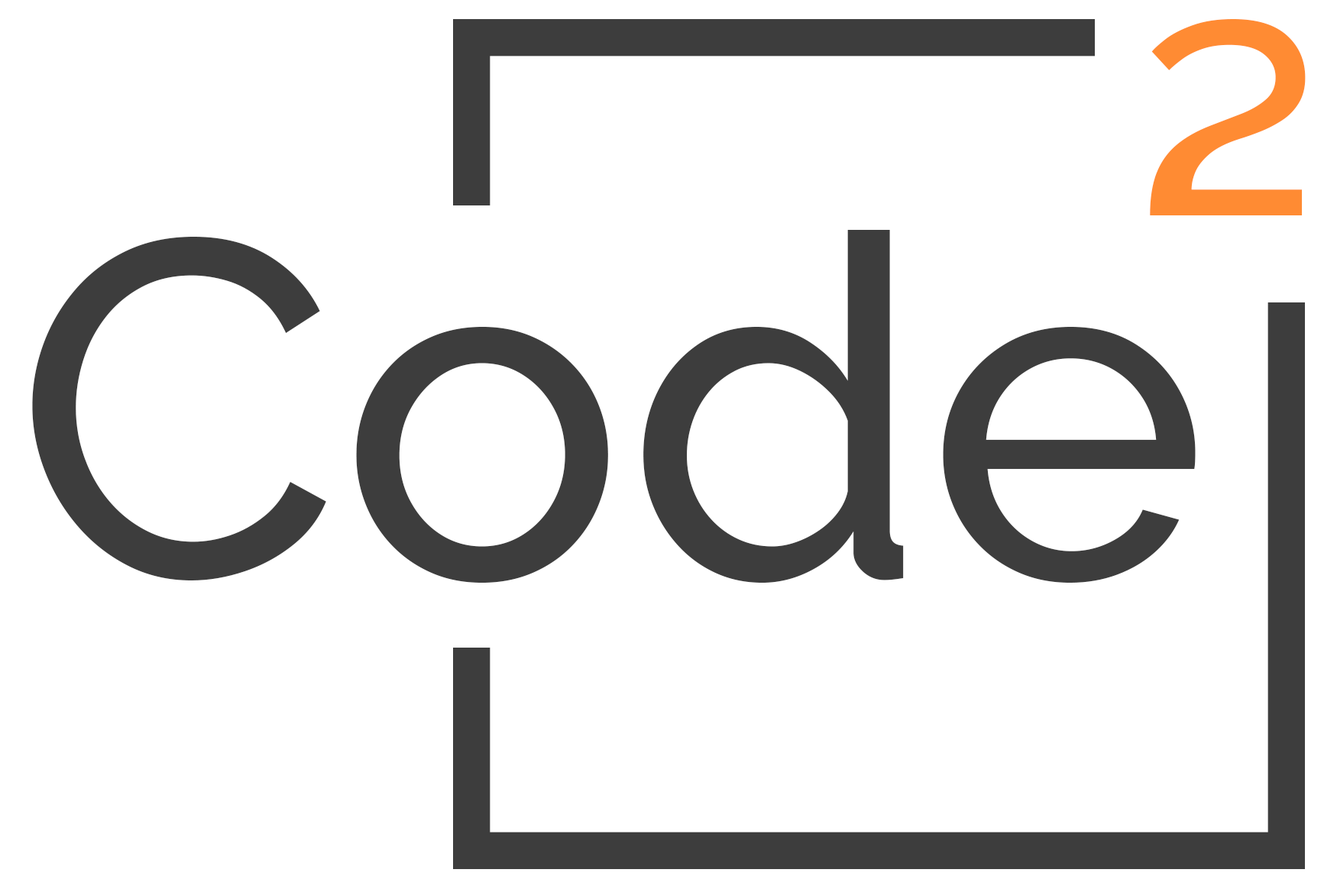
<style>
.page{position:relative;width:1337px;height:892px;background:#ffffff}
.page>*{position:absolute;margin:0}
.t1{font:477.4px "Raleway-Medium";color:#ff8b33}
.t2{font:477.4px "Raleway-Medium";color:#3d3d3d}
</style>
<div class="page">
<p class="t1" style="left:1150px;top:19px;width:155px;height:196px">²</p>
<p class="t2" style="left:32px;top:230px;width:1163px;height:353px">Code</p>
</div>
